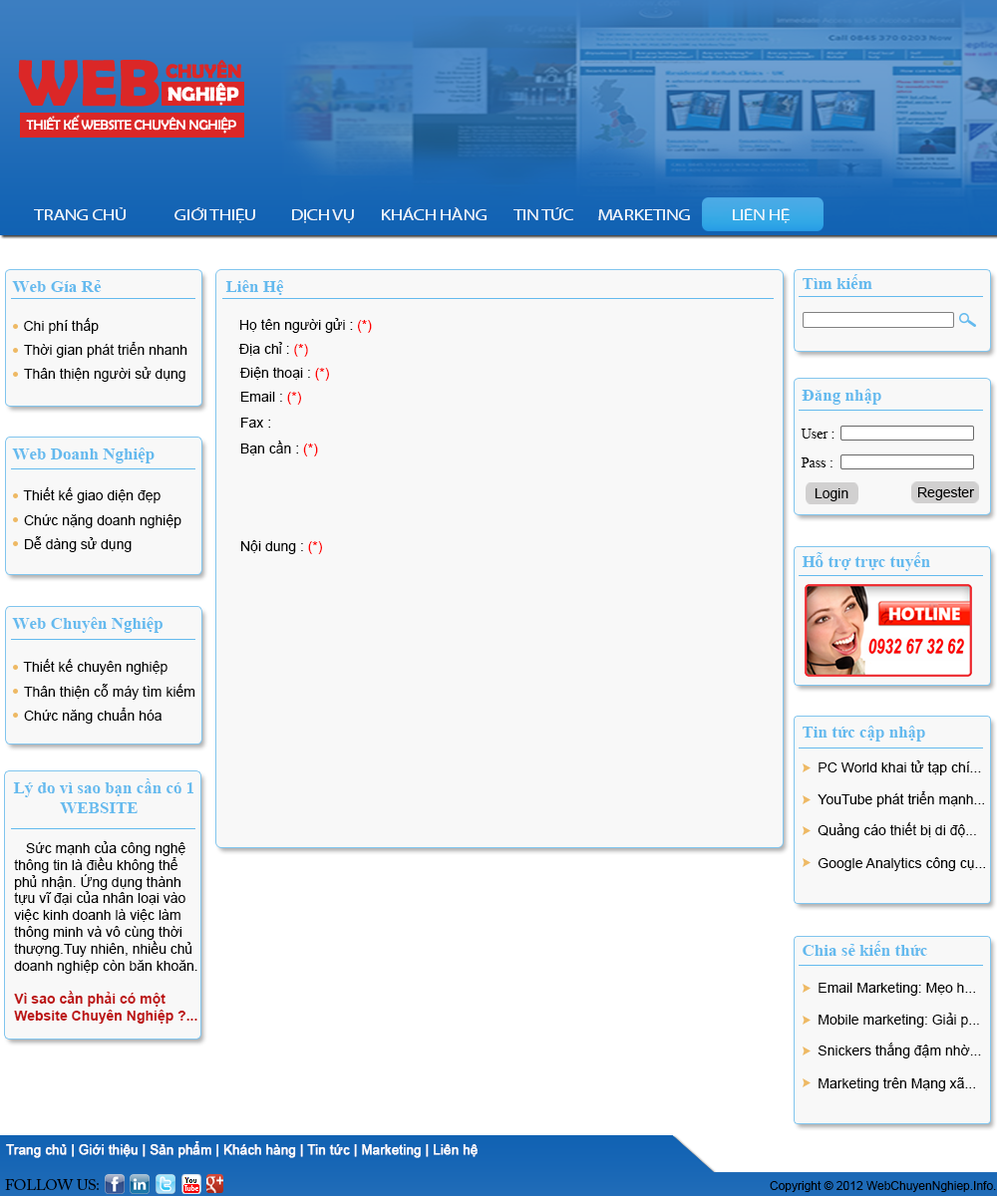
<style>
.page{position:relative;width:997px;height:1196px;background:#f8f8f8}
.page>*{position:absolute;margin:0}
.t1{font:14.9px "MyriadPro-Regular";letter-spacing:-0.05em;color:#eef6fb;text-transform:uppercase;scale:1.3 1}
.t2{font:16.9px "TimesNewRomanPS-BoldMT";color:#64baee}
.t3{font:14px "ArialMT";color:#000000}
.t4{font:14px "ArialMT";color:#ff0000}
.t5{font:14px "TimesNewRomanPSMT";color:#000000}
.t6{font:17.3px "TimesNewRomanPS-BoldMT";color:#64baee}
.t7{font:14px "Arial-BoldMT";color:#bd1515}
.t8{font:13px "ArialMT";color:#ffffff;font-weight:bold}
.t9{font:15px "ACaslonPro-Regular";color:#000000}
.t10{font:12px "ArialMT";color:#000000}
</style>
<div class="page">
<p class="t1" style="left:34px;top:207px;width:92px;height:13px">trang chủ</p>
<p class="t1" style="left:174px;top:207px;width:81px;height:16px">GIỚI THIỆU</p>
<p class="t1" style="left:292px;top:209px;width:62px;height:14px">DỊCH VỤ</p>
<p class="t1" style="left:382px;top:207px;width:104px;height:13px">kHÁCH HÀNG</p>
<p class="t1" style="left:513px;top:207px;width:60px;height:13px">TIN TỨC</p>
<p class="t1" style="left:598px;top:209px;width:92px;height:11px">marketing</p>
<p class="t1" style="left:733px;top:208px;width:56px;height:15px">lIÊN HỆ</p>
<p class="t2" style="left:12px;top:280px;width:90px;height:12px">Web Gía Rẻ</p>
<p class="t2" style="left:225px;top:280px;width:58px;height:15px">Liên Hệ</p>
<p class="t2" style="left:802px;top:274px;width:70px;height:15px">Tìm kiếm</p>
<p class="t3" style="left:24px;top:318px;width:75px;height:16px">Chi phí thấp</p>
<p class="t3" style="left:240px;top:318px;width:132px;height:15px">Họ tên người gửi : <span class="t4">(*)</span></p>
<p class="t3" style="left:24px;top:342px;width:163px;height:16px">Thời gian phát triển nhanh</p>
<p class="t3" style="left:238px;top:342px;width:70px;height:15px">Địa chỉ : <span class="t4">(*)</span></p>
<p class="t3" style="left:24px;top:367px;width:161px;height:15px">Thân thiện người sử dụng</p>
<p class="t3" style="left:239px;top:367px;width:90px;height:14px">Điện thoại : <span class="t4">(*)</span></p>
<p class="t2" style="left:801px;top:389px;width:80px;height:16px">Đăng nhập</p>
<p class="t3" style="left:241px;top:392px;width:60px;height:13px">Email : <span class="t4">(*)</span></p>
<p class="t3" style="left:241px;top:418px;width:29px;height:10px">Fax :</p>
<p class="t5" style="left:800px;top:429px;width:34px;height:10px">User :</p>
<p class="t2" style="left:12px;top:448px;width:143px;height:16px">Web Doanh Nghiệp</p>
<p class="t3" style="left:240px;top:441px;width:78px;height:16px">Bạn cần : <span class="t4">(*)</span></p>
<p class="t5" style="left:800px;top:458px;width:32px;height:10px">Pass :</p>
<p class="t3" style="left:23px;top:487px;width:137px;height:16px">Thiết kế giao diện đẹp</p>
<p class="t3" style="left:814px;top:488px;width:34px;height:13px">Login</p>
<p class="t3" style="left:918px;top:486px;width:57px;height:14px">Regester</p>
<p class="t3" style="left:24px;top:514px;width:157px;height:14px">Chức nặng doanh nghiệp</p>
<p class="t3" style="left:25px;top:536px;width:107px;height:16px">Dễ dàng sử dụng</p>
<p class="t3" style="left:240px;top:540px;width:82px;height:14px">Nội dung : <span class="t4">(*)</span></p>
<p class="t2" style="left:801px;top:552px;width:129px;height:19px">Hỗ trợ trực tuyến</p>
<p class="t2" style="left:12px;top:617px;width:150px;height:16px">Web Chuyên Nghiệp</p>
<p class="t3" style="left:23px;top:659px;width:144px;height:16px">Thiết kế chuyên nghiệp</p>
<p class="t3" style="left:24px;top:684px;width:171px;height:16px">Thân thiện cỗ máy tìm kiếm</p>
<p class="t3" style="left:24px;top:708px;width:137px;height:16px">Chức năng chuẩn hóa</p>
<p class="t2" style="left:802px;top:726px;width:123px;height:16px">Tin tức cập nhập</p>
<p class="t3" style="left:818px;top:761px;width:163px;height:15px">PC World khai tử tạp chí...</p>
<p class="t6" style="left:13px;top:779px;width:180px;height:34px">Lý do vì sao bạn cần có 1<br>           WEBSITE</p>
<p class="t3" style="left:817px;top:791px;width:167px;height:16px">YouTube phát triển mạnh...</p>
<p class="t3" style="left:817px;top:822px;width:159px;height:16px">Quảng cáo thiết bị di độ...</p>
<p class="t3" style="left:14px;top:841px;width:183px;height:183px">Sức mạnh của công nghệ<br>thông tin là điều không thể<br>phủ nhận. Ứng dụng thành<br>tựu vĩ đại của nhân loại vào<br>việc kinh doanh là việc làm<br>thông minh và vô cùng thời<br>thượng.Tuy nhiên, nhiều chủ<br>doanh nghiệp còn băn khoăn.<br><br><span class="t7">Vì sao cần phải có một<br>Website Chuyên Nghiệp ?...</span></p>
<p class="t3" style="left:817px;top:857px;width:168px;height:14px">Google Analytics công cụ...</p>
<p class="t2" style="left:802px;top:941px;width:125px;height:15px">Chia sẻ kiến thức</p>
<p class="t3" style="left:818px;top:982px;width:157px;height:14px">Email Marketing: Mẹo h...</p>
<p class="t3" style="left:818px;top:1013px;width:161px;height:15px">Mobile marketing: Giải p...</p>
<p class="t3" style="left:817px;top:1043px;width:164px;height:16px">Snickers thắng đậm nhờ...</p>
<p class="t3" style="left:818px;top:1078px;width:157px;height:14px">Marketing trên Mạng xã...</p>
<p class="t8" style="left:6px;top:1141px;width:471px;height:17px">Trang chủ | Giới thiệu | Sản phẩm | Khách hàng | Tin tức | Marketing | Liên hệ</p>
<p class="t9" style="left:5px;top:1179px;width:94px;height:12px">FOLLOW US:</p>
<p class="t10" style="left:770px;top:1181px;width:226px;height:11px">Copyright © 2012 WebChuyenNghiep.Info.</p>
</div>
